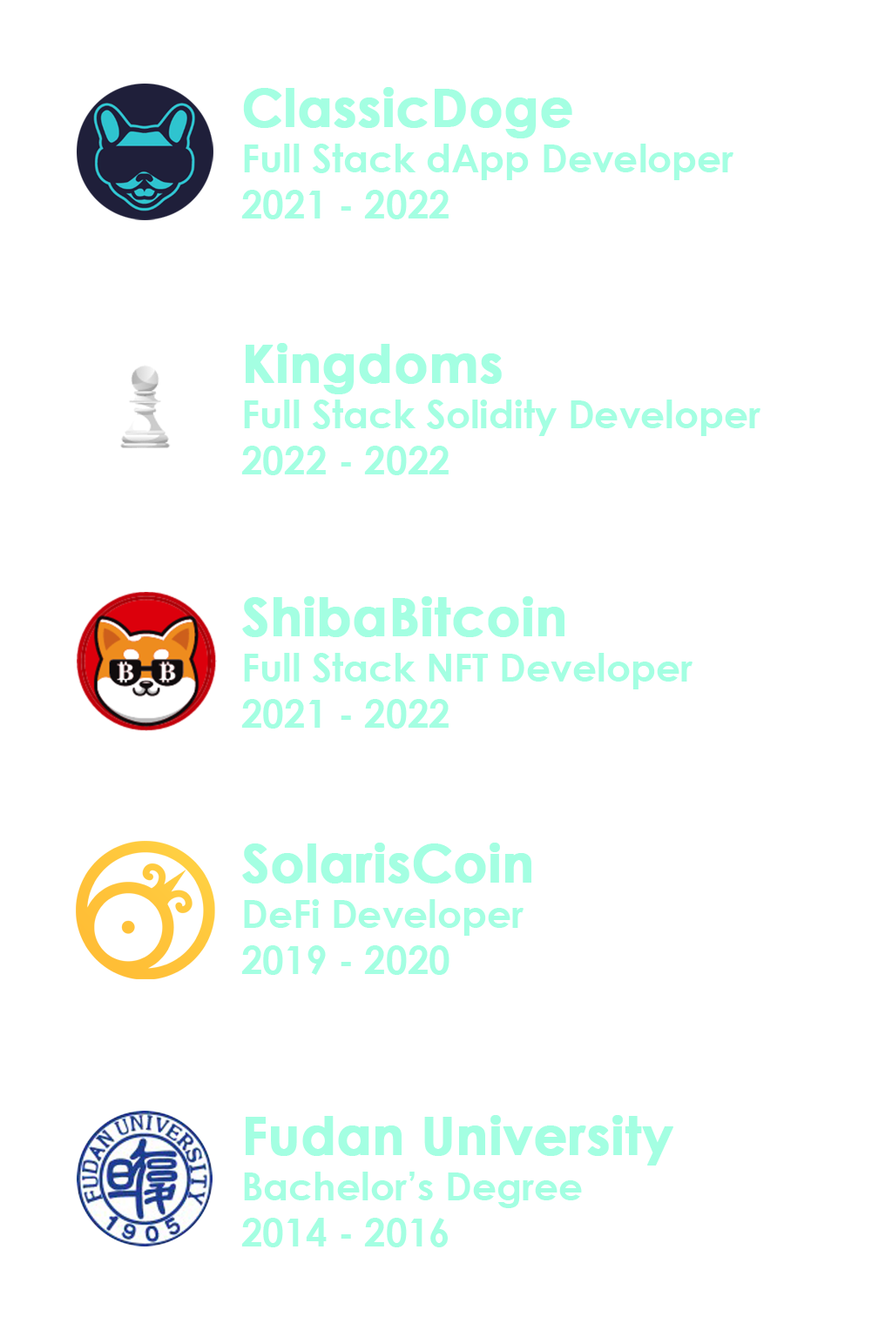
<style>
.page{position:relative;width:892px;height:1337px;background:#ffffff}
.page>*{position:absolute;margin:0}
.t1{font:38.3px "CenturyGothic-Bold";color:#a4ffe2}
.t2{font:52.2px "CenturyGothic-Bold";color:#a4ffe2;font-weight:bold}
</style>
<div class="page">
<p class="t1" style="left:241px;top:87px;width:492px;height:132px"><span class="t2">ClassicDoge<br></span>Full Stack dApp Developer<br>2021 - 2022</p>
<p class="t1" style="left:241px;top:343px;width:519px;height:132px"><span class="t2">Kingdoms<br></span>Full Stack Solidity Developer<br>2022 - 2022</p>
<p class="t1" style="left:241px;top:596px;width:451px;height:133px"><span class="t2">ShibaBitcoin<br></span>Full Stack NFT Developer<br>2021 - 2022</p>
<p class="t1" style="left:241px;top:843px;width:290px;height:132px"><span class="t2">SolarisCoin<br></span>DeFi Developer<br>2019 - 2020</p>
<p class="t1" style="left:241px;top:1115px;width:432px;height:133px"><span class="t2">Fudan University<br></span>Bachelor’s Degree<br>2014 - 2016</p>
</div>
